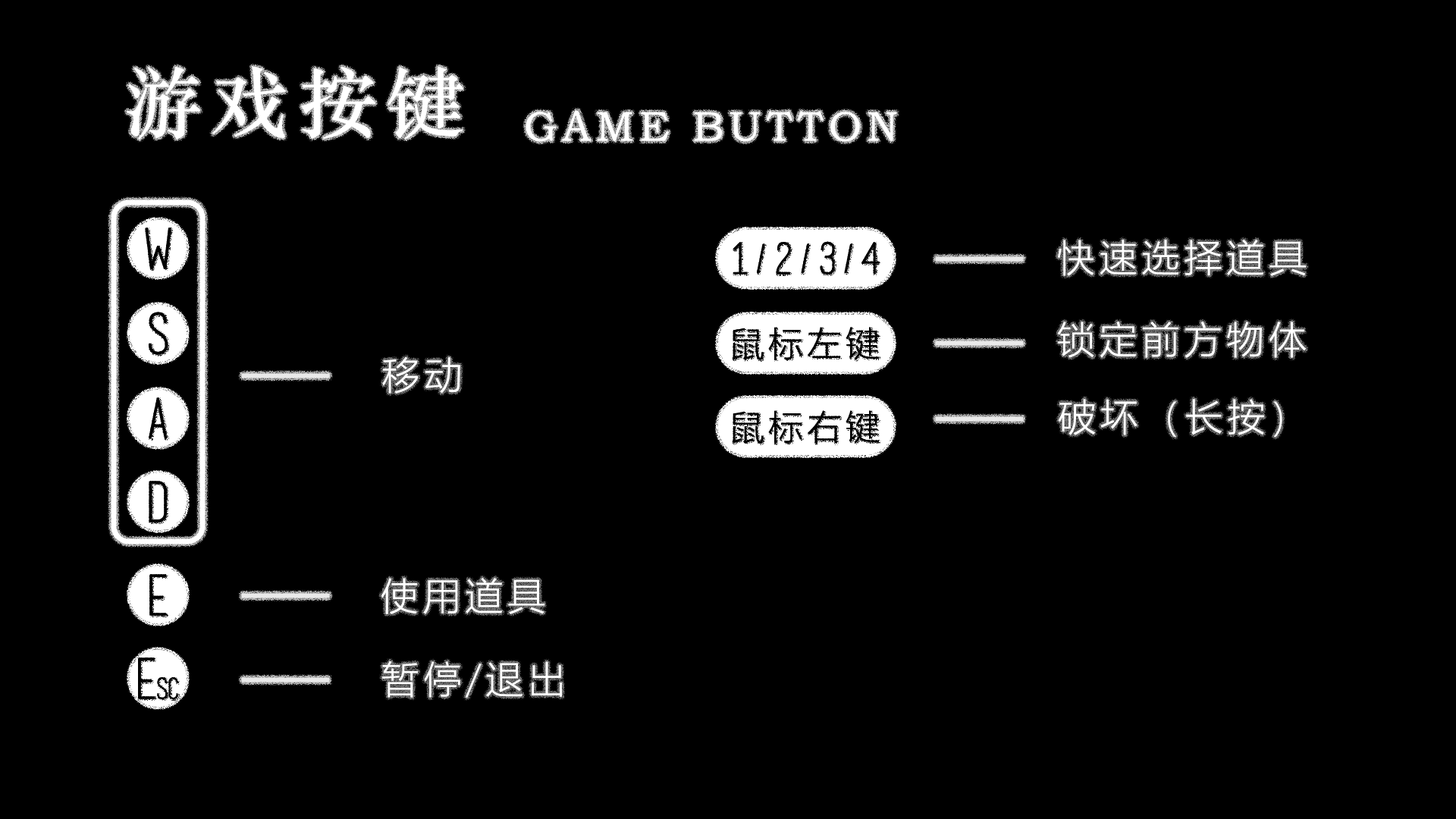
<style>
.page{position:relative;width:1456px;height:819px;background:#000000}
.page>*{position:absolute;margin:0}
.t1{font:78.4px "STZhongsong";letter-spacing:0.12em;color:#ffffff}
.t2{font:41.8px "STZhongsong";letter-spacing:0.12em;color:#ffffff}
.t3{font:37.8px "MicrosoftYaHeiLight";letter-spacing:0.12em;color:#ffffff}
</style>
<div class="page">
<p class="t1" style="left:127px;top:66px;width:336px;height:74px">游戏按键</p>
<p class="t2" style="left:526px;top:111px;width:371px;height:31px">GAME BUTTON</p>
<p class="t3" style="left:1057px;top:240px;width:249px;height:36px">快速选择道具</p>
<p class="t3" style="left:1057px;top:322px;width:249px;height:36px">锁定前方物体</p>
<p class="t3" style="left:382px;top:357px;width:78px;height:37px">移动</p>
<p class="t3" style="left:1058px;top:399px;width:224px;height:38px">破坏（长按）</p>
<p class="t3" style="left:381px;top:578px;width:163px;height:36px">使用道具</p>
<p class="t3" style="left:382px;top:660px;width:180px;height:38px">暂停/退出</p>
</div>
